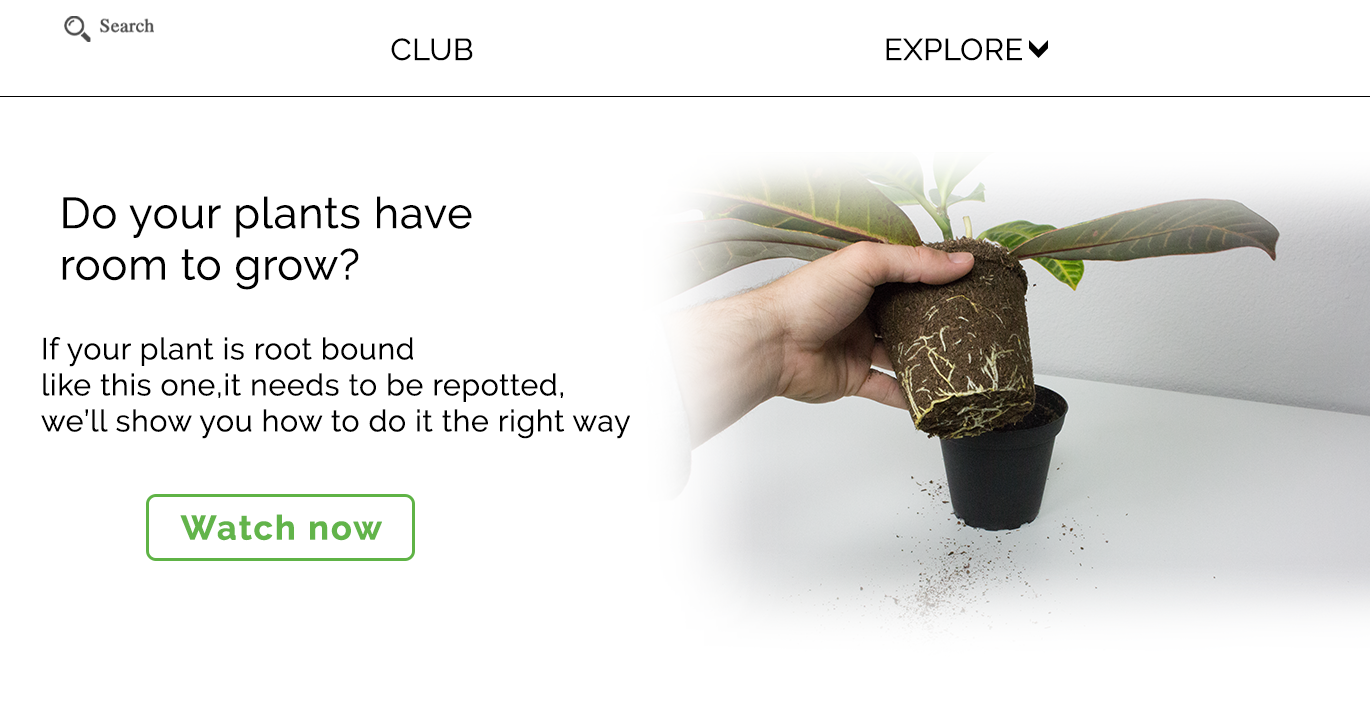
<style>
.page{position:relative;width:1370px;height:712px;background:#ffffff}
.page>*{position:absolute;margin:0}
.t1{font:30px "Raleway-Regular";color:#000000;font-weight:bold}
.t2{font:42.9px "Raleway-Regular";color:#000000;font-weight:bold}
.t3{font:34px "Raleway-Bold";letter-spacing:0.04em;color:#62b44a;font-weight:bold}
</style>
<div class="page">
<p class="t1" style="left:391px;top:38px;width:82px;height:23px">CLUB</p>
<p class="t1" style="left:886px;top:38px;width:136px;height:23px">EXPLORE</p>
<p class="t2" style="left:62px;top:196px;width:410px;height:94px">Do your plants have<br>room to grow?</p>
<p class="t1" style="left:41px;top:337px;width:589px;height:102px">If your plant is root bound<br>like this one,it needs to be repotted,<br>we’ll show you how to do it the right way</p>
<p class="t3" style="left:180px;top:514px;width:202px;height:27px">Watch now</p>
</div>
